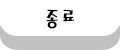
<style>
.page{position:relative;width:120px;height:50px;background:#ffffff}
.page>*{position:absolute;margin:0}
.t1{font:20px "MagicR-HM";color:#000000;scale:1.2 1}
</style>
<div class="page">
<p class="t1" style="left:46px;top:9px;width:28px;height:20px">종료</p>
</div>
